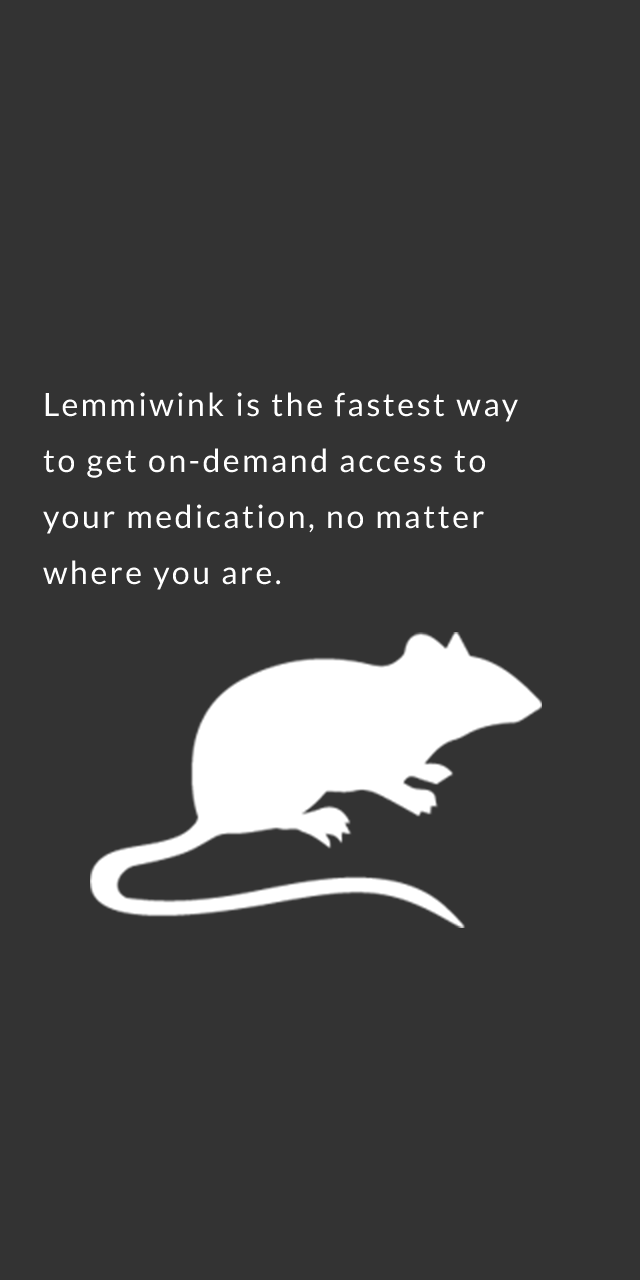
<style>
.page{position:relative;width:640px;height:1280px;background:#333333}
.page>*{position:absolute;margin:0}
.t1{font:32px/56px "Lato-Regular";letter-spacing:0.08em;color:#ffffff}
</style>
<div class="page">
<p class="t1" style="left:43px;top:392px;width:475px;height:198px">Lemmiwink is the fastest way<br>to get on-demand access to <br>your medication, no matter<br>where you are.</p>
</div>
